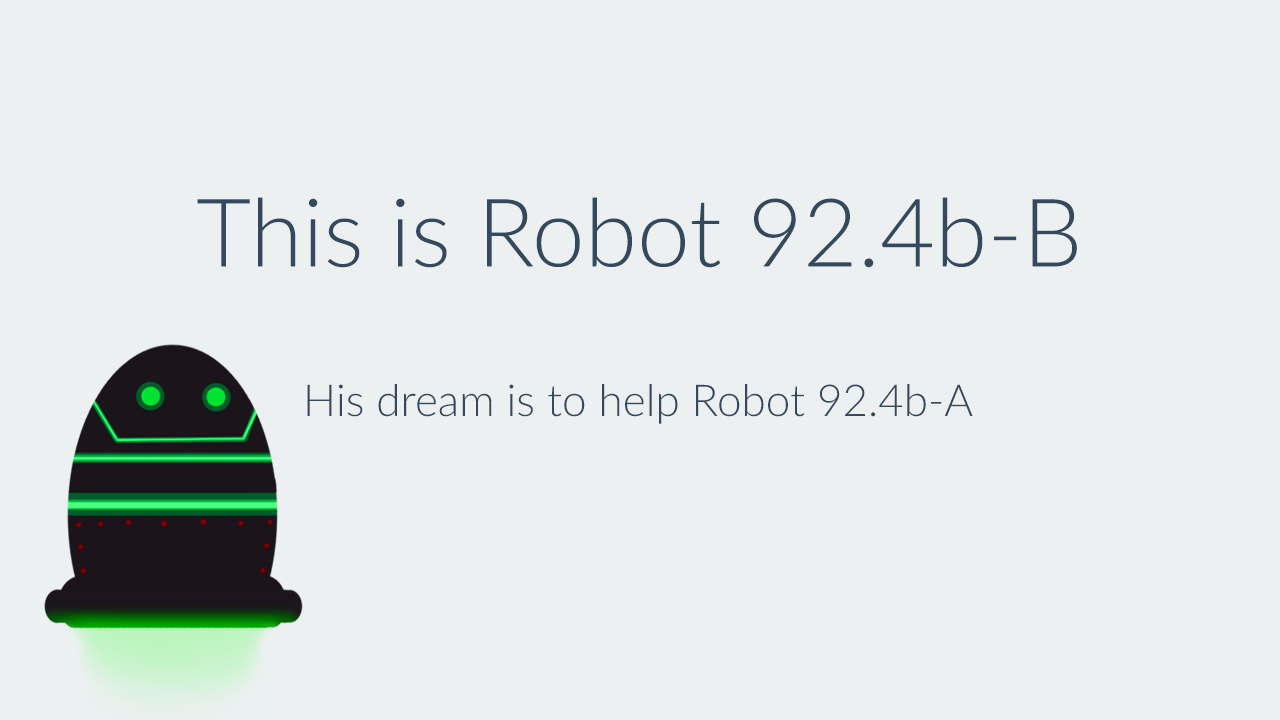
<style>
.page{position:relative;width:1280px;height:720px;background:#ecf0f1}
.page>*{position:absolute;margin:0}
.t1{font:95px "Lato-Light";color:#34495e}
.t2{font:44px "Lato-Light";color:#34495e}
</style>
<div class="page">
<p class="t1" style="left:197px;top:197px;width:880px;height:71px">This is Robot 92.4b-B</p>
<p class="t2" style="left:307px;top:384px;width:666px;height:40px">His dream is to help Robot 92.4b-A</p>
</div>
